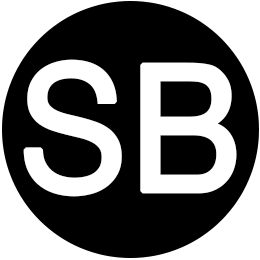
<style>
.page{position:relative;width:260px;height:260px;background:#000000}
.page>*{position:absolute;margin:0}
.t1{font:176px "HelveticaNeue";color:#ffffff;font-variant:small-caps;font-weight:bold;scale:0.92 1}
</style>
<div class="page">
<p class="t1" style="left:23px;top:59px;width:214px;height:138px">SB</p>
</div>
